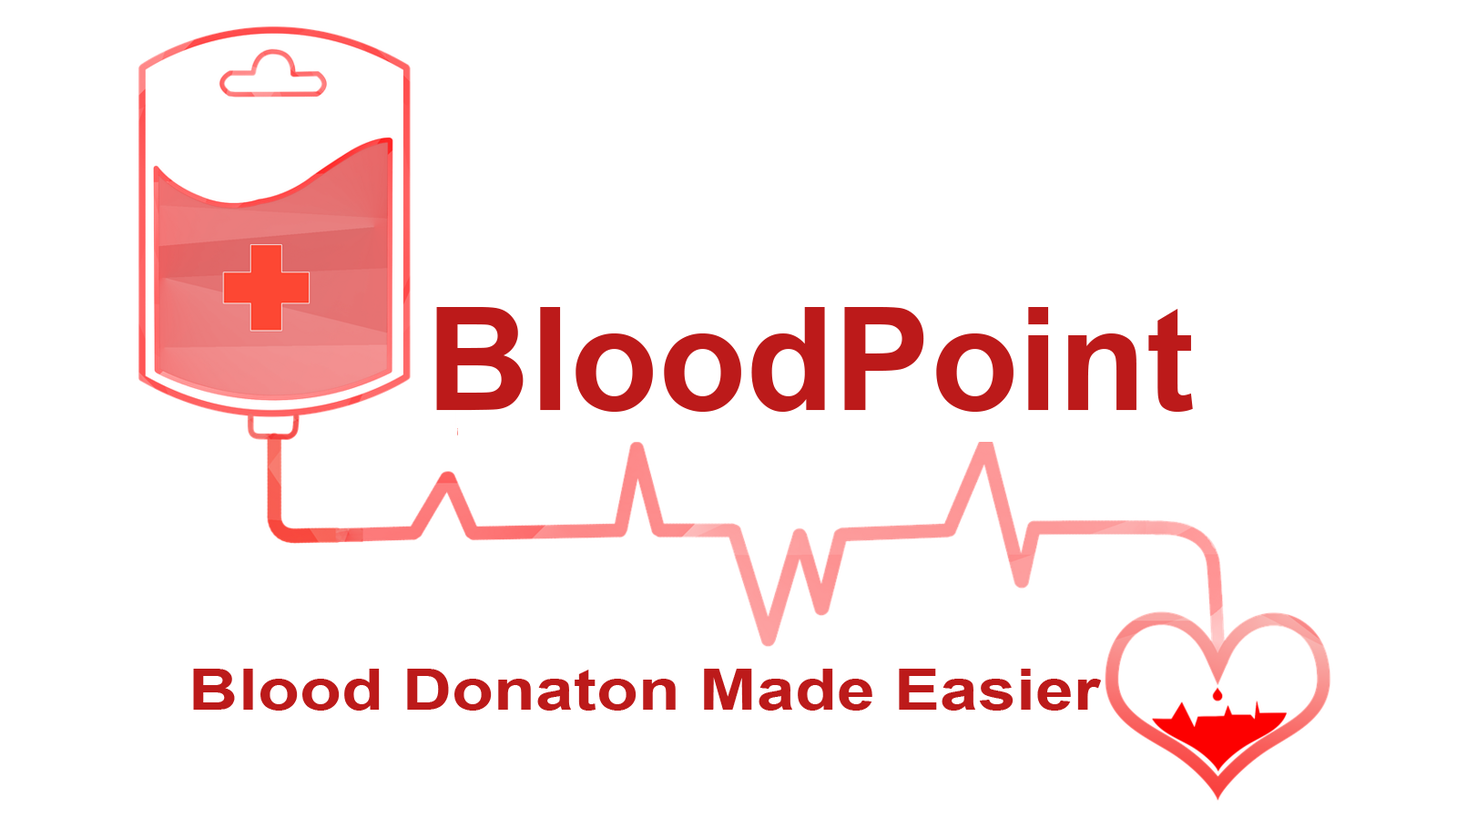
<style>
.page{position:relative;width:1457px;height:819px;background:#ffffff}
.page>*{position:absolute;margin:0}
.t1{font:144.1px "Arial-BoldMT";color:#bc1a1a}
.t2{font:56.5px "Arial-BoldMT";color:#bc1a1a;scale:1.22 1}
</style>
<div class="page">
<p class="t1" style="left:436px;top:307px;width:757px;height:105px">BloodPoint</p>
<p class="t2" style="left:193px;top:668px;width:908px;height:42px">Blood Donaton Made Easier</p>
</div>
